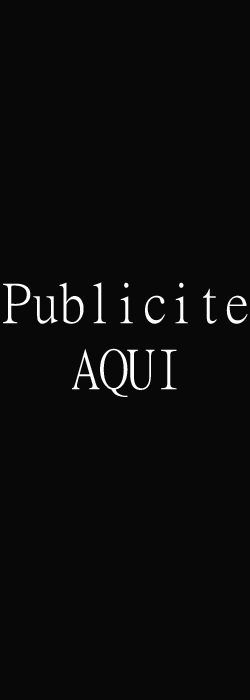
<style>
.page{position:relative;width:250px;height:700px;background:#080808}
.page>*{position:absolute;margin:0}
.t1{font:55px "MingLiU-ExtB";color:#fefefe}
</style>
<div class="page">
<p class="t1" style="left:3px;top:282px;width:245px;height:115px;text-align:center">Publicite<br>AQUI</p>
</div>
